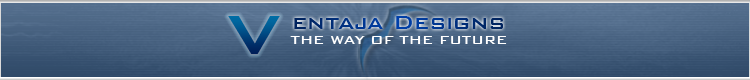
<style>
.page{position:relative;width:750px;height:80px}
.page>*{position:absolute;margin:0}
.t1{font:90px "BankGothicBT-Medium"}
.t2{font:25px "BankGothicBT-Medium"}
.t3{font:15px "BankGothicBT-Medium";color:#ffffff}
</style>
<div class="page">
<p class="t1" style="left:228px;top:16px;width:52px;height:38px">v</p>
<p class="t2" style="left:294px;top:16px;width:209px;height:13px">entaja Designs</p>
<p class="t3" style="left:290px;top:36px;width:217px;height:8px">THE WAY OF THE FUTURE</p>
</div>
